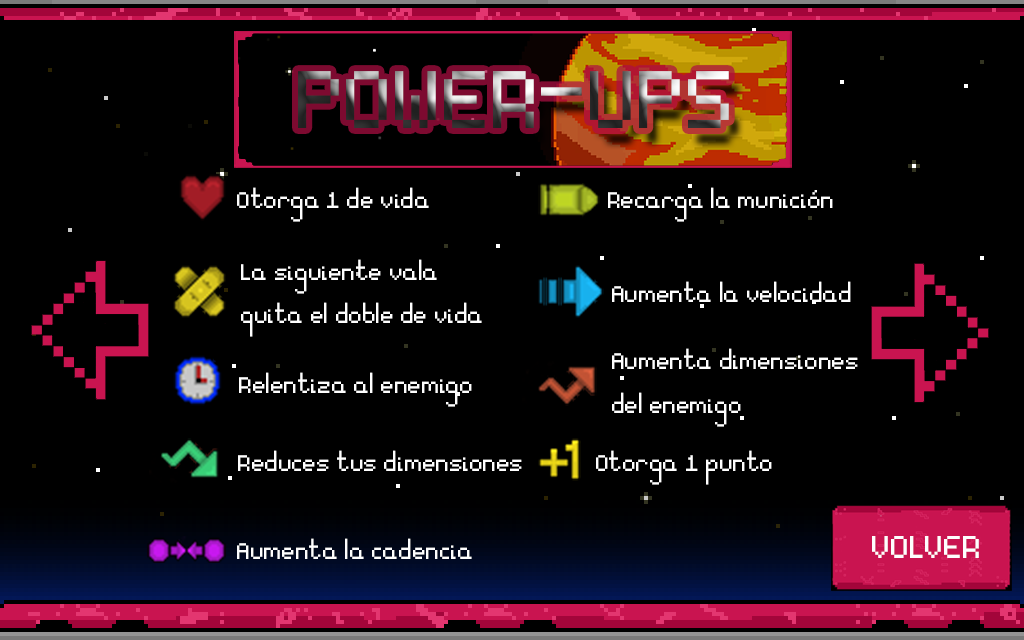
<style>
.page{position:relative;width:1024px;height:640px;background:#000000}
.page>*{position:absolute;margin:0}
.t1{font:130px "Essential"}
.t2{font:155.1px "Essential"}
.t3{font:36px "Essential";color:#fefefe}
.t4{font:50.5px "Essential";color:#fefefe}
</style>
<div class="page">
<p class="t1" style="left:298px;top:71px;width:431px;height:57px"><span class="t2"> <br></span>POWER-UPS</p>
<p class="t3" style="left:237px;top:187px;width:192px;height:35px">Otorga 1 de vida</p>
<p class="t3" style="left:608px;top:187px;width:225px;height:35px">Recarga la munición</p>
<p class="t3" style="left:241px;top:259px;width:241px;height:78px">La siguiente vala <br>quita el doble de vida</p>
<p class="t3" style="left:612px;top:281px;width:239px;height:21px">Aumenta la velocidad</p>
<p class="t3" style="left:612px;top:348px;width:246px;height:79px">Aumenta dimensiones <br>del enemigo</p>
<p class="t3" style="left:239px;top:372px;width:233px;height:35px">Relentiza al enemigo</p>
<p class="t3" style="left:238px;top:450px;width:284px;height:21px">Reduces tus dimensiones</p>
<p class="t3" style="left:596px;top:450px;width:176px;height:35px">Otorga 1 punto</p>
<p class="t3" style="left:237px;top:538px;width:235px;height:21px">Aumenta la cadencia</p>
<p class="t4" style="left:872px;top:536px;width:107px;height:22px">VOLVER</p>
</div>
